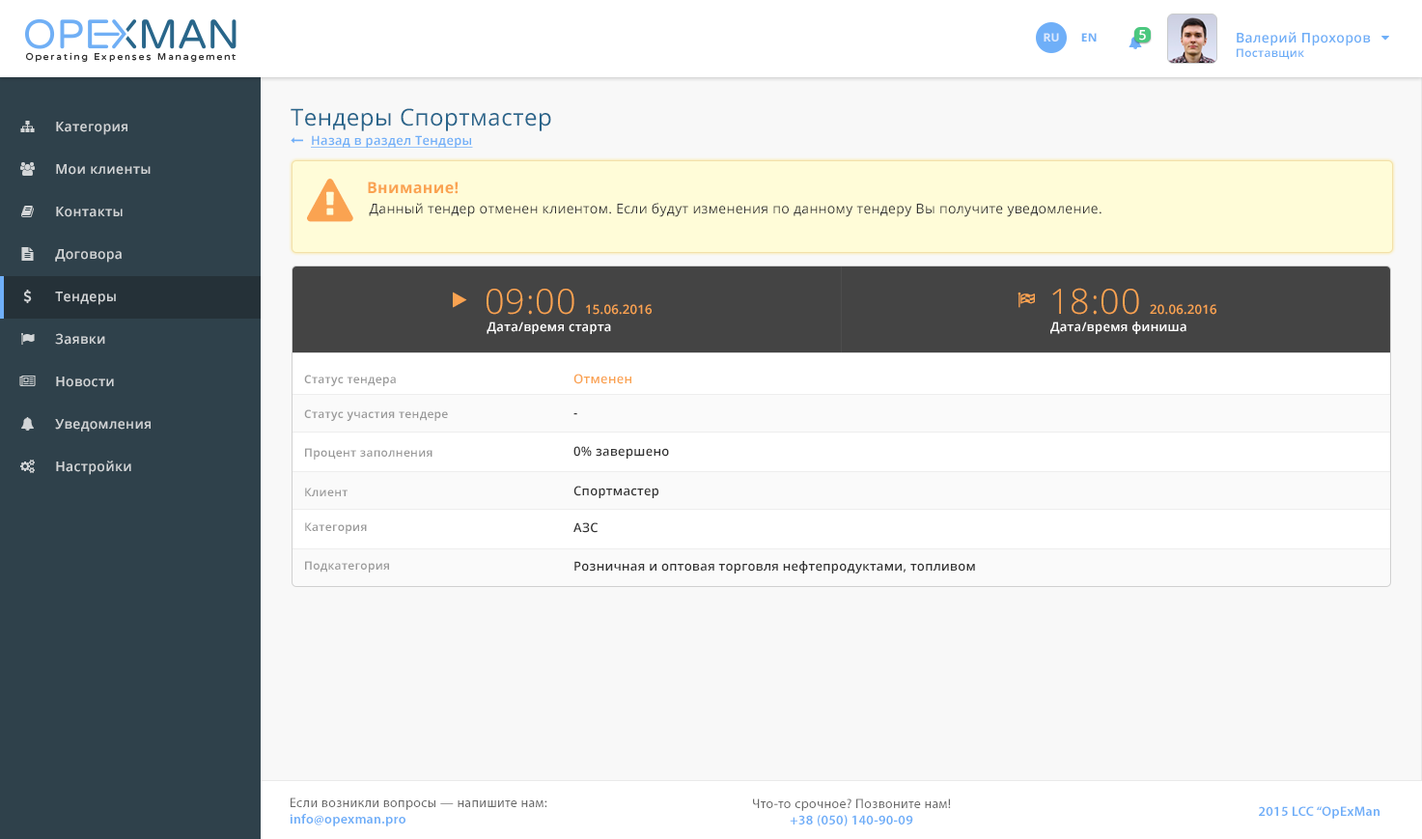
<style>
.page{position:relative;width:1422px;height:839px;background:#f8f8f8}
.page>*{position:absolute;margin:0}
.t1{font:13.5px "OpenSans-Semibold";letter-spacing:0.025em;color:#ffffff}
.t2{font:11.6px "OpenSans-Bold";letter-spacing:0.025em;color:#dbe9fd;text-transform:uppercase}
.t3{font:11.6px "OpenSans-Bold";letter-spacing:0.025em;color:#6faff8;text-transform:uppercase}
.t4{font:13.5px "OpenSans-Semibold";letter-spacing:0.025em;color:#6eaef7}
.t5{font:11.6px "OpenSans-Semibold";letter-spacing:0.025em;color:#6eaef7}
.t6{font:23.1px "OpenSans";letter-spacing:0.025em;color:#29658b}
.t7{font:13.5px "OpenSans-Semibold";letter-spacing:0.025em;color:#d2d5d7}
.t8{font:12.5px "OpenSans-Semibold";letter-spacing:0.025em;color:#6faff8;text-decoration:underline}
.t9{font:15.4px "OpenSans-Bold";letter-spacing:0.025em;color:#faa351}
.t10{font:13.5px "OpenSans";letter-spacing:0.025em;color:#333333}
.t11{font:34.7px "OpenSans-Light";letter-spacing:0.025em;color:#faa351}
.t12{font:12.5px "OpenSans-Semibold";letter-spacing:0.025em;color:#faa351}
.t13{font:12.5px "OpenSans-Semibold";letter-spacing:0.025em;color:#ffffff}
.t14{font:11.6px "OpenSans-Semibold";letter-spacing:0.025em;color:#999999}
.t15{font:12.5px "OpenSans-Semibold";letter-spacing:0.025em;color:#333333}
.t16{font:13.5px "MyriadPro-Regular";letter-spacing:0.025em;color:#696969}
.t17{font:13.5px "MyriadPro-Semibold";letter-spacing:0.025em;color:#6eaef8}
</style>
<div class="page">
<p class="t1" style="left:1139px;top:30px;width:7px;height:11px">5</p>
<p class="t2" style="left:1043px;top:33px;width:16px;height:9px">Ru</p>
<p class="t3" style="left:1081px;top:33px;width:15px;height:9px">EN</p>
<p class="t4" style="left:1236px;top:32px;width:135px;height:28px">Валерий Прохоров<br><span class="t5">Поставщик</span></p>
<p class="t6" style="left:291px;top:108px;width:260px;height:23px">Тендеры Спортмастер</p>
<p class="t7" style="left:56px;top:122px;width:71px;height:13px">Категория</p>
<p class="t8" style="left:311px;top:135px;width:162px;height:13px">Назад в раздел Тендеры</p>
<p class="t7" style="left:56px;top:164px;width:95px;height:11px">Мои клиенты</p>
<p class="t9" style="left:368px;top:181px;width:90px;height:13px">Внимание!</p>
<p class="t7" style="left:56px;top:207px;width:67px;height:10px">Контакты</p>
<p class="t10" style="left:369px;top:203px;width:732px;height:14px">Данный тендер отменен клиентом. Если будут изменения по данному тендеру Вы получите уведомление.</p>
<p class="t7" style="left:55px;top:249px;width:67px;height:14px">Договора</p>
<p class="t7" style="left:55px;top:291px;width:61px;height:14px">Тендеры</p>
<p class="t11" style="left:486px;top:289px;width:88px;height:26px">09:00</p>
<p class="t11" style="left:1052px;top:288px;width:87px;height:27px">18:00</p>
<p class="t12" style="left:586px;top:304px;width:65px;height:11px">15.06.2016</p>
<p class="t12" style="left:1150px;top:304px;width:66px;height:11px">20.06.2016</p>
<p class="t13" style="left:486px;top:321px;width:125px;height:13px">Дата/время старта</p>
<p class="t13" style="left:1050px;top:321px;width:136px;height:13px">Дата/время финиша</p>
<p class="t7" style="left:55px;top:333px;width:50px;height:12px">Заявки</p>
<p class="t7" style="left:56px;top:376px;width:58px;height:11px">Новости</p>
<p class="t14" style="left:304px;top:374px;width:92px;height:12px">Статус тендера</p>
<p class="t12" style="left:573px;top:374px;width:58px;height:10px">Отменен</p>
<p class="t14" style="left:304px;top:409px;width:144px;height:12px">Статус участия тендере</p>
<p class="t15" style="left:573px;top:413px;width:4px;height:2px">-</p>
<p class="t7" style="left:55px;top:419px;width:96px;height:12px">Уведомления</p>
<p class="t14" style="left:305px;top:448px;width:127px;height:11px">Процент заполнения</p>
<p class="t15" style="left:573px;top:446px;width:96px;height:12px">0% завершено</p>
<p class="t7" style="left:56px;top:460px;width:75px;height:15px">Настройки</p>
<p class="t15" style="left:573px;top:485px;width:85px;height:13px">Спортмастер</p>
<p class="t14" style="left:305px;top:487px;width:42px;height:9px">Клиент</p>
<p class="t14" style="left:305px;top:522px;width:62px;height:12px">Категория</p>
<p class="t15" style="left:573px;top:522px;width:24px;height:11px">АЗС</p>
<p class="t14" style="left:305px;top:561px;width:84px;height:11px">Подкатегория</p>
<p class="t15" style="left:574px;top:561px;width:401px;height:12px">Розничная и оптовая торговля нефтепродуктами, топливом</p>
<p class="t16" style="left:290px;top:797px;width:257px;height:29px">Если возникли вопросы — напишите нам:<br><span class="t17">info@opexman.pro</span></p>
<p class="t16" style="left:753px;top:798px;width:198px;height:28px;text-align:center">Что-то срочное? Позвоните нам!<br><span class="t17">+38 (050) 140-90-09</span></p>
<p class="t17" style="left:1259px;top:806px;width:120px;height:12px">2015 LCC “OpExMan</p>
</div>
